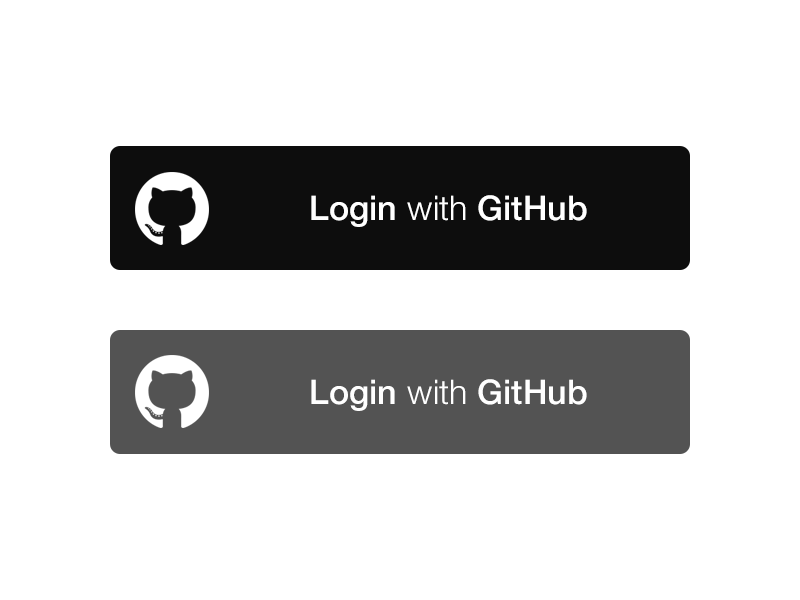
<style>
.page{position:relative;width:800px;height:600px;background:#ffffff}
.page>*{position:absolute;margin:0}
.t1{font:34px "HelveticaNeue-Medium";color:#ffffff}
.t2{font:34px "HelveticaNeue-Light";color:#ffffff}
</style>
<div class="page">
<p class="t1" style="left:311px;top:195px;width:276px;height:32px">Login <span class="t2">with</span> GitHub</p>
<p class="t1" style="left:311px;top:379px;width:276px;height:32px">Login <span class="t2">with</span> GitHub</p>
</div>
